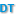
<style>
.page{position:relative;width:16px;height:16px;background:#ffffff}
.page>*{position:absolute;margin:0}
.t1{font:10.7px "Arial-BoldMT";letter-spacing:0.05em;color:#0096dc}
</style>
<div class="page">
<p class="t1" style="left:0px;top:4px;width:7px;height:8px">D</p>
<p class="t1" style="left:7px;top:4px;width:8px;height:8px">T</p>
</div>
